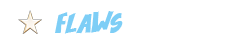
<style>
.page{position:relative;width:250px;height:45px;background:#ffffff}
.page>*{position:absolute;margin:0}
.t1{font:30px "HoustonComicsPersonalUse";color:#7ecef6}
</style>
<div class="page">
<p class="t1" style="left:55px;top:11px;width:68px;height:23px">FLAWS</p>
</div>
